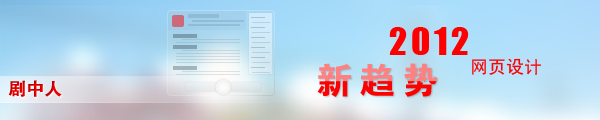
<style>
.page{position:relative;width:600px;height:120px}
.page>*{position:absolute;margin:0}
.t1{font:36px "Impact";letter-spacing:0.1em;color:#ff0000}
.t2{font:36px "FZDHTJW--GB1-0";letter-spacing:0.2em}
.t3{font:18px "SimHei";color:#ff0000}
.t4{font:18px "FZDHTJW--GB1-0"}
</style>
<div class="page">
<p class="t1" style="left:389px;top:27px;width:80px;height:28px">2012</p>
<p class="t2" style="left:317px;top:63px;width:121px;height:34px">新趋势</p>
<p class="t3" style="left:472px;top:58px;width:69px;height:17px">网页设计</p>
<p class="t4" style="left:8px;top:80px;width:54px;height:17px">剧中人</p>
</div>
